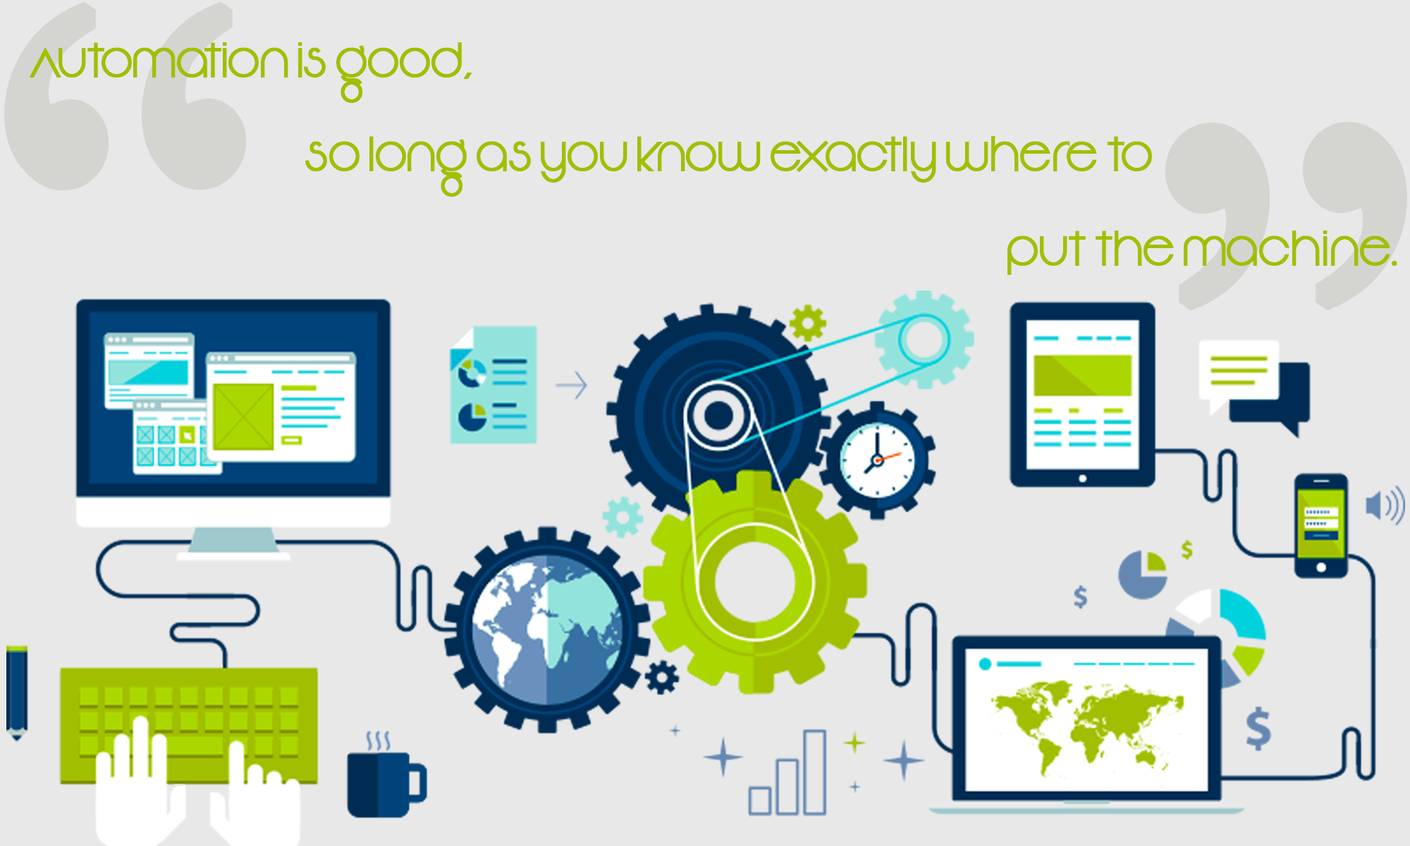
<style>
.page{position:relative;width:1410px;height:846px;background:#e8e8e8}
.page>*{position:absolute;margin:0}
.t1{font:685.2px "TimesNewRomanPSMT";color:#d4d5d1;font-weight:bold;scale:0.86 1}
.t2{font:39.2px "Vonique92";color:#a1bf00;font-weight:bold}
</style>
<div class="page">
<p class="t1" style="left:4px;top:1px;width:243px;height:190px">“</p>
<p class="t2" style="left:30px;top:42px;width:1367px;height:233px;text-align:center">Automation is good,<br>                <br>                                      so long as you know exactly where to <br>                                                    <br>                                                                           put the machine.</p>
<p class="t1" style="left:1164px;top:121px;width:243px;height:190px;rotate:180deg">“</p>
</div>
